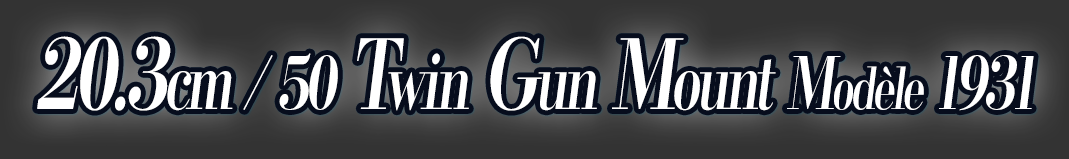
<style>
.page{position:relative;width:1069px;height:159px}
.page>*{position:absolute;margin:0}
.t1{font:57.6px "KochoStd-Heavy";letter-spacing:-0.08em;color:#ffffff;font-style:italic;scale:0.72 1}
.t2{font:96px "KochoStd-Heavy";letter-spacing:-0.08em;color:#ffffff;font-style:italic;scale:0.72 1}
.t3{font:76.8px "KochoStd-Heavy";letter-spacing:-0.08em;color:#ffffff;font-style:italic;scale:0.72 1}
.t4{font:72px "KochoStd-Heavy";letter-spacing:-0.08em;color:#ffffff;font-style:italic;scale:0.72 1}
</style>
<div class="page">
<p class="t1" style="left:37px;top:36px;width:997px;height:75px"><span class="t2">20.3</span><span class="t3">cm</span><span class="t4"> / 50</span><span class="t2"> T</span><span class="t3">win</span><span class="t2"> G</span><span class="t3">un</span><span class="t2"> M</span><span class="t3">ount </span><span class="t4">M</span>odèle <span class="t4">1931</span></p>
</div>
